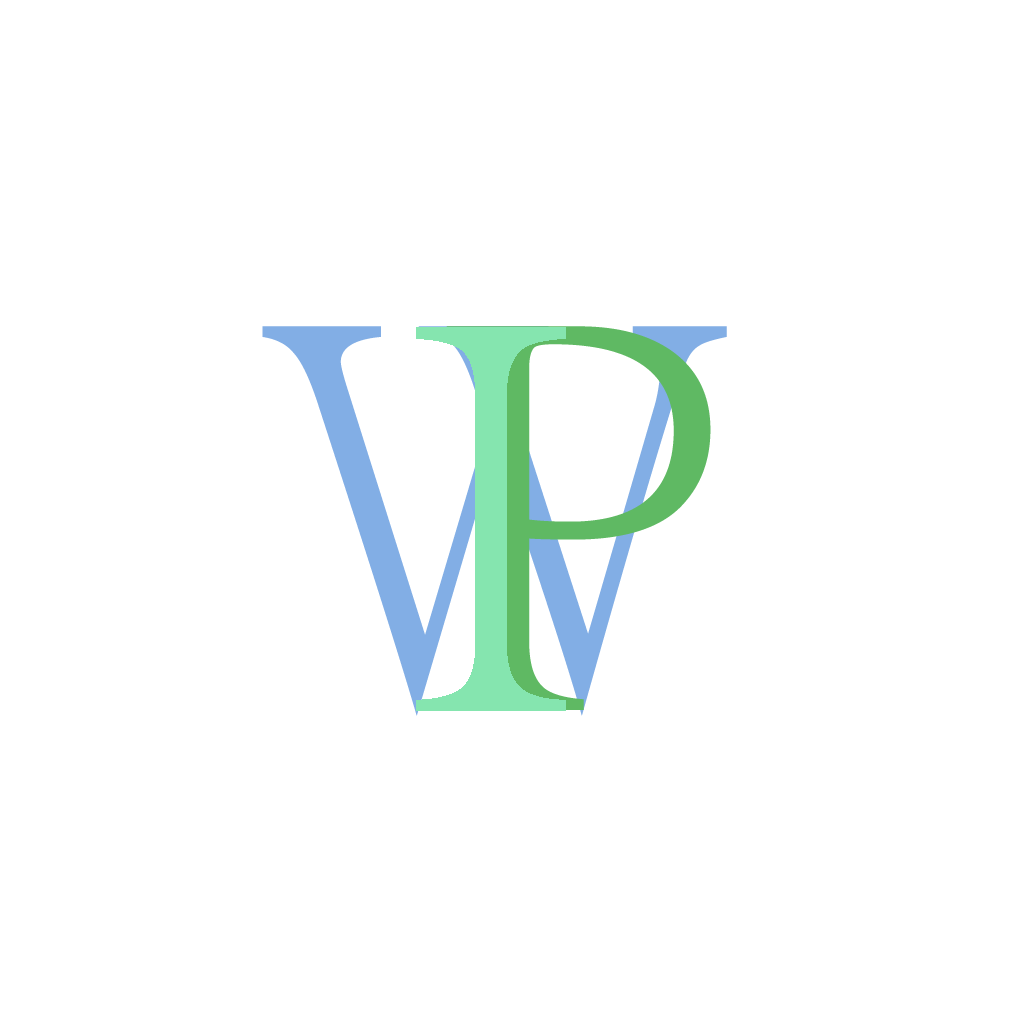
<style>
.page{position:relative;width:1024px;height:1024px;background:#ffffff}
.page>*{position:absolute;margin:0}
.t1{font:533.3px "PMingLiU-ExtB";color:#82aee5}
.t2{font:533.3px "PMingLiU-ExtB";color:#85e5af}
.t3{font:533.3px "PMingLiU-ExtB";color:#5fb963}
</style>
<div class="page">
<p class="t1" style="left:262px;top:326px;width:465px;height:390px">W</p>
<p class="t2" style="left:416px;top:327px;width:150px;height:384px">I</p>
<p class="t3" style="left:446px;top:326px;width:265px;height:384px">P</p>
</div>
